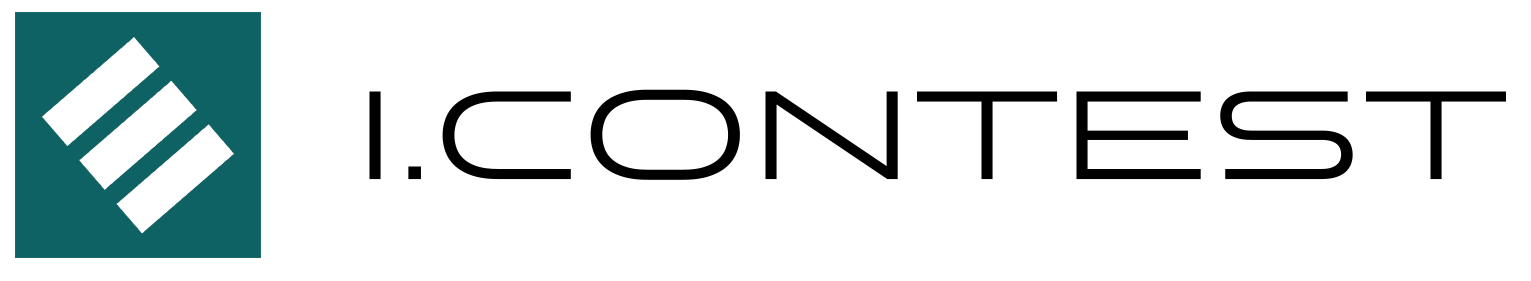
<style>
.page{position:relative;width:1531px;height:281px;background:#ffffff}
.page>*{position:absolute;margin:0}
.t1{font:125px "StereoGothicW01-400";color:#000000}
</style>
<div class="page">
<p class="t1" style="left:369px;top:89px;width:1137px;height:91px">I.CONTEST</p>
</div>
